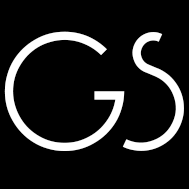
<style>
.page{position:relative;width:189px;height:189px;background:#000000}
.page>*{position:absolute;margin:0}
.t1{font:162.5px "MANIFESTO";letter-spacing:-0.2em;color:#ffffff}
</style>
<div class="page">
<p class="t1" style="left:4px;top:31px;width:180px;height:120px">gs</p>
</div>
